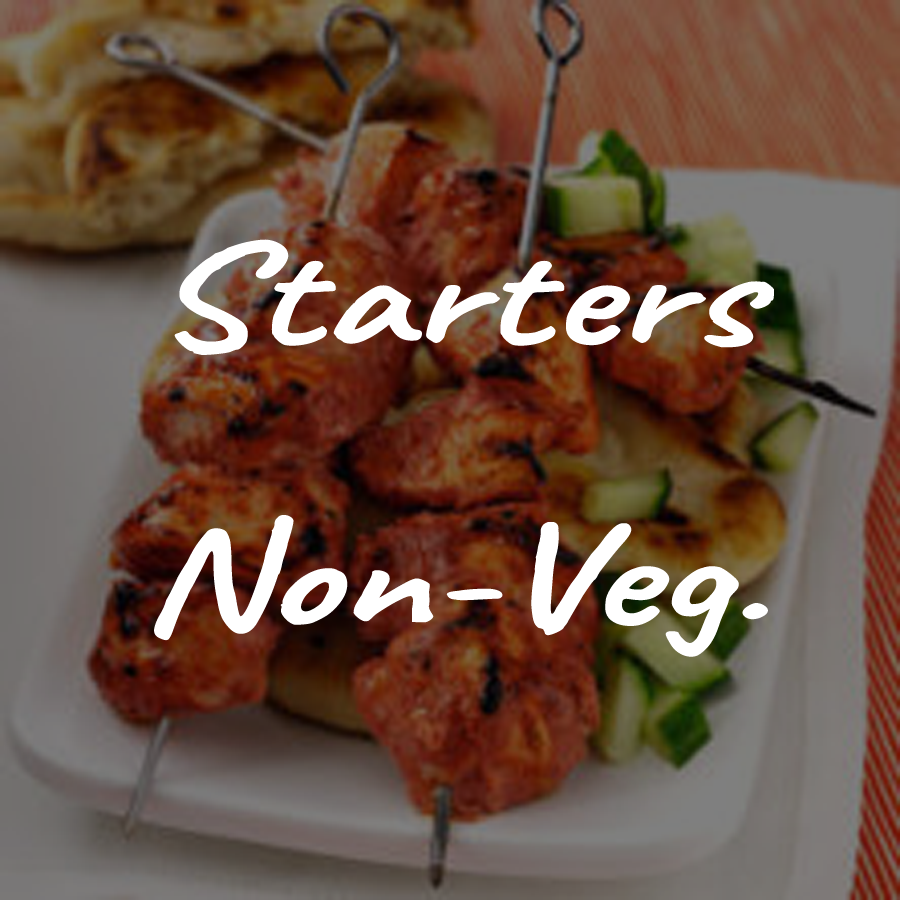
<style>
.page{position:relative;width:900px;height:900px}
.page>*{position:absolute;margin:0}
.t1{font:150px "Caveat-Bold";color:#ffffff;scale:1.34 1}
</style>
<div class="page">
<p class="t1" style="left:154px;top:239px;width:620px;height:418px;text-align:center">Starters<br>Non-Veg.</p>
</div>
